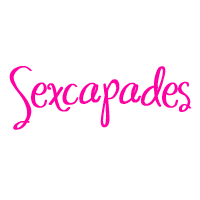
<style>
.page{position:relative;width:200px;height:200px;background:#ffffff}
.page>*{position:absolute;margin:0}
.t1{font:38px "MASexy";color:#ff00a2;font-weight:bold}
</style>
<div class="page">
<p class="t1" style="left:9px;top:66px;width:183px;height:64px">Sexcapades</p>
</div>
